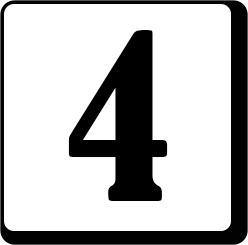
<style>
.page{position:relative;width:248px;height:245px;background:#ffffff}
.page>*{position:absolute;margin:0}
.t1{font:216px "BernardMT-Condensed";color:#010000}
</style>
<div class="page">
<p class="t1" style="left:68px;top:30px;width:100px;height:171px">4</p>
</div>
